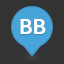
<style>
.page{position:relative;width:64px;height:64px;background:#333333}
.page>*{position:absolute;margin:0}
.t1{font:21px "Roboto-Bold";color:#ffffff}
</style>
<div class="page">
<p class="t1" style="left:20px;top:19px;width:26px;height:15px">BB</p>
</div>
